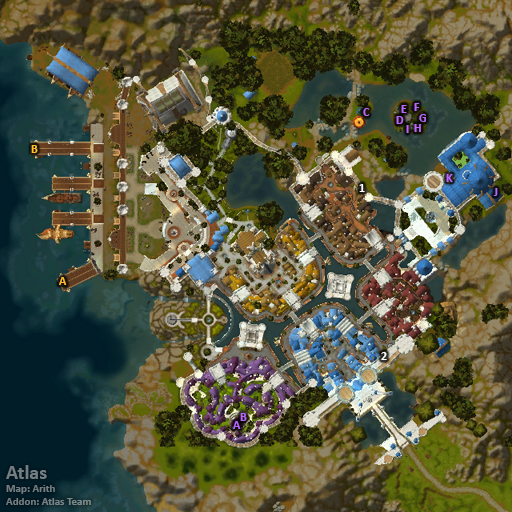
<style>
.page{position:relative;width:512px;height:512px}
.page>*{position:absolute;margin:0}
.t1{font:12px "Calibri-Bold";color:#bb66ff}
.t2{font:12px "Calibri-Bold";color:#ffbf28}
.t3{font:12px "Calibri-Bold";color:#ffffff}
.t4{font:11px "Calibri-Bold";color:#747d81}
.t5{font:20px "Calibri-Bold";color:#747d81}
</style>
<div class="page">
<p class="t1" style="left:363px;top:108px;width:7px;height:8px">C</p>
<p class="t1" style="left:401px;top:105px;width:6px;height:8px">E</p>
<p class="t1" style="left:414px;top:103px;width:6px;height:8px">F</p>
<p class="t1" style="left:396px;top:116px;width:8px;height:8px">D</p>
<p class="t1" style="left:406px;top:125px;width:3px;height:8px">I</p>
<p class="t1" style="left:414px;top:124px;width:7px;height:8px">H</p>
<p class="t1" style="left:419px;top:114px;width:7px;height:8px">G</p>
<p class="t2" style="left:31px;top:145px;width:7px;height:8px">B</p>
<p class="t1" style="left:446px;top:174px;width:7px;height:8px">K</p>
<p class="t3" style="left:359px;top:184px;width:6px;height:8px">1</p>
<p class="t1" style="left:493px;top:188px;width:5px;height:8px">J</p>
<p class="t2" style="left:59px;top:277px;width:8px;height:8px">A</p>
<p class="t3" style="left:381px;top:352px;width:6px;height:8px">2</p>
<p class="t1" style="left:240px;top:413px;width:7px;height:8px">B</p>
<p class="t1" style="left:233px;top:421px;width:8px;height:8px">A</p>
<p class="t4" style="left:6px;top:465px;width:85px;height:40px"><span class="t5">Atlas<br></span>Map: Arith<br>Addon: Atlas Team</p>
</div>
